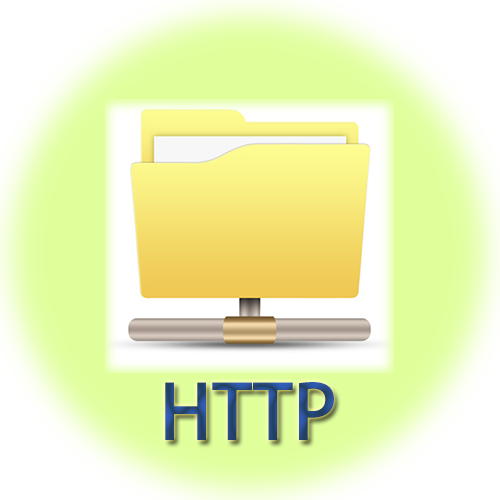
<style>
.page{position:relative;width:500px;height:500px}
.page>*{position:absolute;margin:0}
.t1{font:75px "AdobeHeitiStd-Regular"}
</style>
<div class="page">
<p class="t1" style="left:165px;top:382px;width:169px;height:58px">HTTP</p>
</div>
